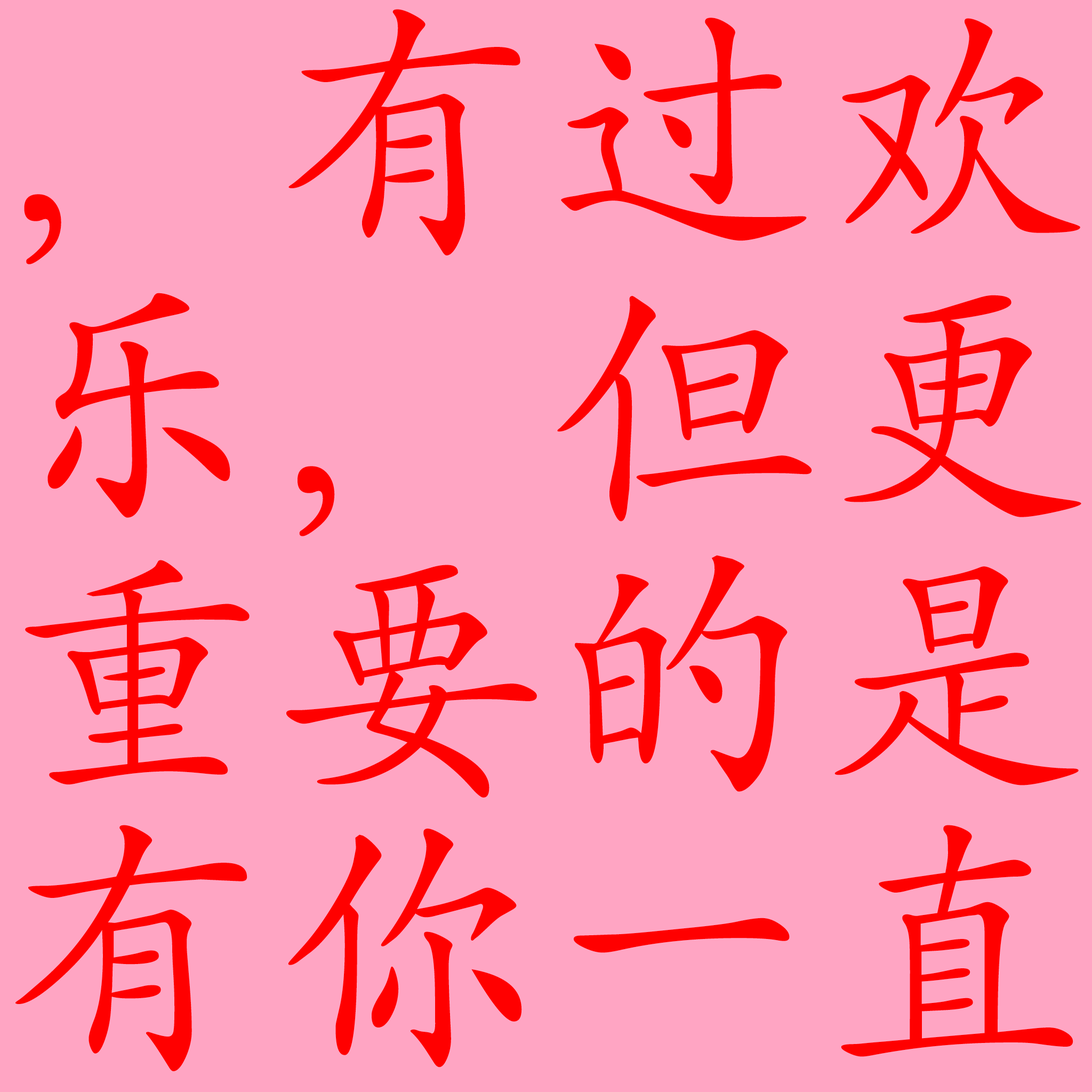
<style>
.page{position:relative;width:1092px;height:1092px;background:#ffa5c3}
.page>*{position:absolute;margin:0}
.t1{font:266.6px/271.9px "SIL-Kai-Reg-Jian";letter-spacing:0.025em;color:#ff0000}
</style>
<div class="page">
<p class="t1" style="left:15px;top:9px;width:1066px;height:1062px">，有过欢<br>乐，但更<br>重要的是<br>有你一直</p>
</div>
